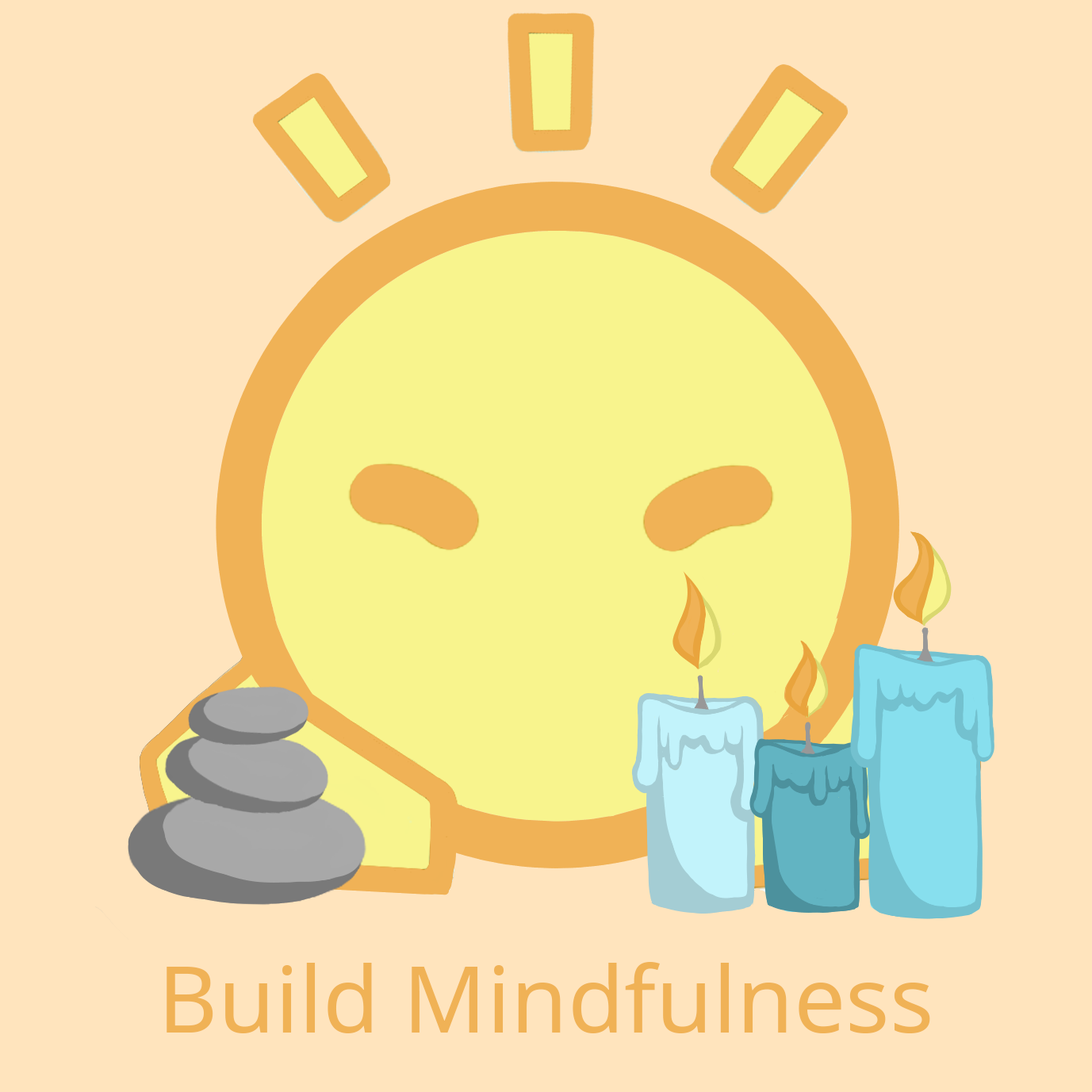
<style>
.page{position:relative;width:1092px;height:1092px;background:#ffe4bd}
.page>*{position:absolute;margin:0}
.t1{font:92.2px "NotoSans";color:#f0b256}
</style>
<div class="page">
<p class="t1" style="left:167px;top:962px;width:763px;height:71px">Build Mindfulness</p>
</div>
